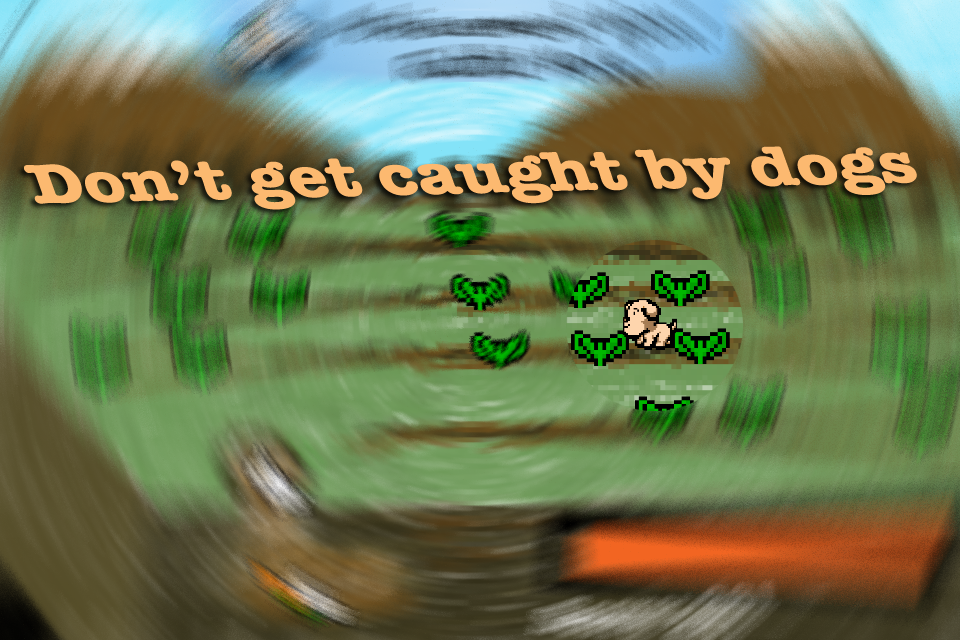
<style>
.page{position:relative;width:960px;height:640px}
.page>*{position:absolute;margin:0}
.t1{font:60.6px "AmericanTypewriter-Bold";color:#fcb970;scale:1.2 1}
</style>
<div class="page">
<p class="t1" style="left:24px;top:146px;width:893px;height:64px;rotate:-1deg">Don’t get caught by dogs</p>
</div>
